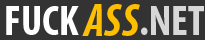
<style>
.page{position:relative;width:205px;height:40px;background:#333333}
.page>*{position:absolute;margin:0}
.t1{font:43px "MyriadPro-BoldCond";color:#ffffff}
.t2{font:46px "MyriadPro-BoldCondIt";color:#febf01}
.t3{font:43px "MyriadPro-BoldCond";color:#d7d7d7}
</style>
<div class="page">
<p class="t1" style="left:6px;top:6px;width:73px;height:29px">FUCK</p>
<p class="t2" style="left:82px;top:4px;width:58px;height:32px">ASS</p>
<p class="t3" style="left:141px;top:6px;width:63px;height:29px">.NET</p>
</div>
